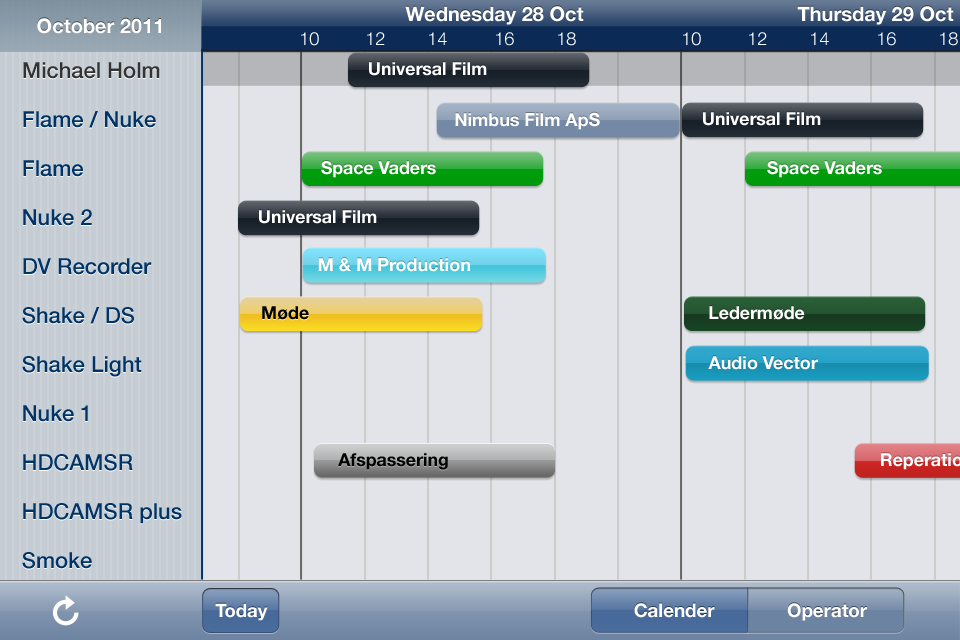
<style>
.page{position:relative;width:960px;height:640px;background:#e2e4e9}
.page>*{position:absolute;margin:0}
.t1{font:20px "HelveticaNeue-Bold";color:#ffffff}
.t2{font:18px "HelveticaNeue-Light";color:#ffffff}
.t3{font:22px/49px "HelveticaNeue-Medium";color:#003366}
.t4{font:22px/49px "HelveticaNeue-Medium";color:#333333}
.t5{font:17.7px "HelveticaNeue-Bold";color:#ffffff}
.t6{font:17.9px "HelveticaNeue-Bold";color:#ffffff}
.t7{font:17.8px "HelveticaNeue-Bold";color:#000000}
.t8{font:17.7px "HelveticaNeue-Bold";color:#000000}
.t9{font:18.5px "HelveticaNeue-Bold";color:#ffffff}
.t10{font:18.7px "HelveticaNeue-Bold";color:#ffffff}
</style>
<div class="page">
<p class="t1" style="left:405px;top:6px;width:179px;height:19px">Wednesday 28 Oct</p>
<p class="t1" style="left:797px;top:6px;width:157px;height:19px">Thursday 29 Oct</p>
<p class="t1" style="left:37px;top:18px;width:124px;height:16px">October 2011</p>
<p class="t2" style="left:301px;top:32px;width:275px;height:14px">10       12     14    16   18</p>
<p class="t2" style="left:683px;top:32px;width:275px;height:14px">10       12     14    16   18</p>
<p class="t3" style="left:22px;top:62px;width:160px;height:507px"><span class="t4">Michael Holm<br></span>Flame / Nuke<br>Flame<br>Nuke 2<br>DV Recorder<br>Shake / DS<br>Shake Light<br>Nuke 1<br>HDCAMSR<br>HDCAMSR plus<br>Smoke</p>
<p class="t5" style="left:369px;top:62px;width:118px;height:14px">Universal Film</p>
<p class="t6" style="left:455px;top:112px;width:145px;height:18px">Nimbus Film ApS</p>
<p class="t5" style="left:703px;top:112px;width:118px;height:14px">Universal Film</p>
<p class="t5" style="left:321px;top:161px;width:115px;height:17px">Space Vaders</p>
<p class="t5" style="left:767px;top:161px;width:115px;height:17px">Space Vaders</p>
<p class="t5" style="left:259px;top:210px;width:118px;height:14px">Universal Film</p>
<p class="t6" style="left:318px;top:258px;width:152px;height:14px">M &amp; M Production</p>
<p class="t7" style="left:262px;top:306px;width:47px;height:14px">Møde</p>
<p class="t5" style="left:709px;top:306px;width:96px;height:14px">Ledermøde</p>
<p class="t6" style="left:708px;top:356px;width:110px;height:14px">Audio Vector</p>
<p class="t8" style="left:338px;top:453px;width:110px;height:17px">Afspassering</p>
<p class="t9" style="left:215px;top:603px;width:53px;height:18px">Today</p>
<p class="t10" style="left:634px;top:603px;width:81px;height:15px">Calender</p>
<p class="t10" style="left:787px;top:603px;width:80px;height:18px">Operator</p>
</div>
